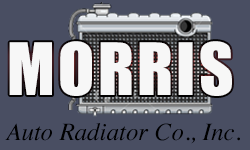
<style>
.page{position:relative;width:250px;height:150px;background:#494e62}
.page>*{position:absolute;margin:0}
.t1{font:66.7px "Impact";letter-spacing:0.05em;color:#f7f7f7}
.t2{font:25px "Times-Italic";color:#000000}
</style>
<div class="page">
<p class="t1" style="left:9px;top:41px;width:223px;height:55px">MORRIS</p>
<p class="t2" style="left:5px;top:123px;width:235px;height:21px">Auto Radiator Co., Inc.</p>
</div>
